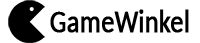
<style>
.page{position:relative;width:200px;height:43px;background:#ffffff}
.page>*{position:absolute;margin:0}
.t1{font:31px "Carlito";color:#000000;font-weight:bold;scale:0.83 1}
</style>
<div class="page">
<p class="t1" style="left:50px;top:9px;width:139px;height:24px">GameWinkel</p>
</div>
